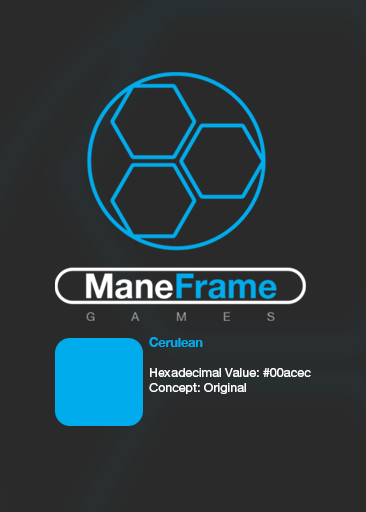
<style>
.page{position:relative;width:366px;height:512px;background:#2a2a2a}
.page>*{position:absolute;margin:0}
.t1{font:12.5px "HelveticaNeueLTPro-Roman";color:#fefefe}
.t2{font:12.5px "HelveticaNeue-Bold";color:#00acec}
</style>
<div class="page">
<p class="t1" style="left:149px;top:337px;width:162px;height:57px"><span class="t2">Cerulean<br></span><br>Hexadecimal Value: #00acec<br>Concept: Original</p>
</div>
